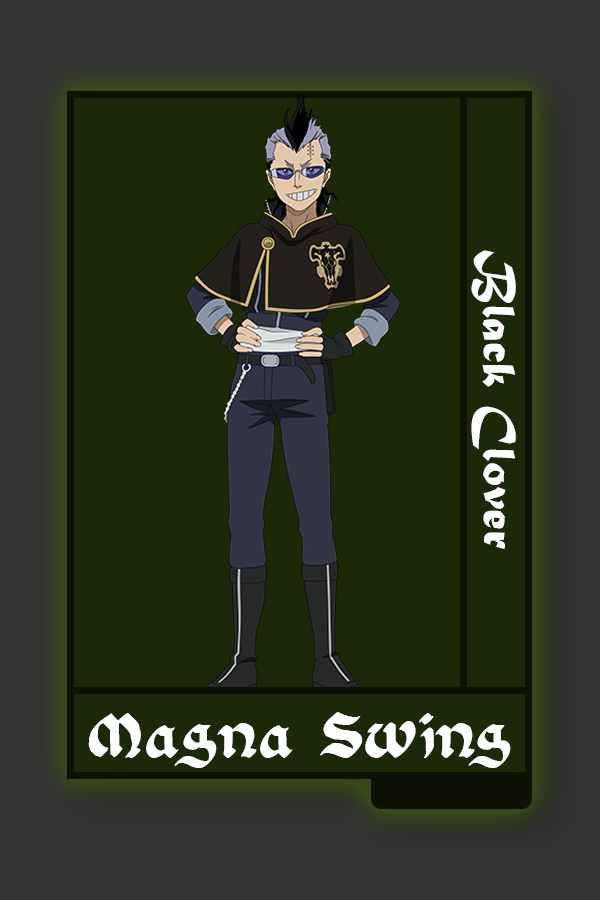
<style>
.page{position:relative;width:600px;height:900px;background:#1b2908}
.page>*{position:absolute;margin:0}
.t1{font:48.8px "MaturaMTScriptCapitals";color:#ffffff}
.t2{font:54.8px "FloranteatLaura";color:#ffffff}
</style>
<div class="page">
<p class="t1" style="left:471px;top:250px;width:45px;height:299px;rotate:90deg">Black Clover</p>
<p class="t2" style="left:88px;top:712px;width:423px;height:56px">Magna Swing</p>
</div>
